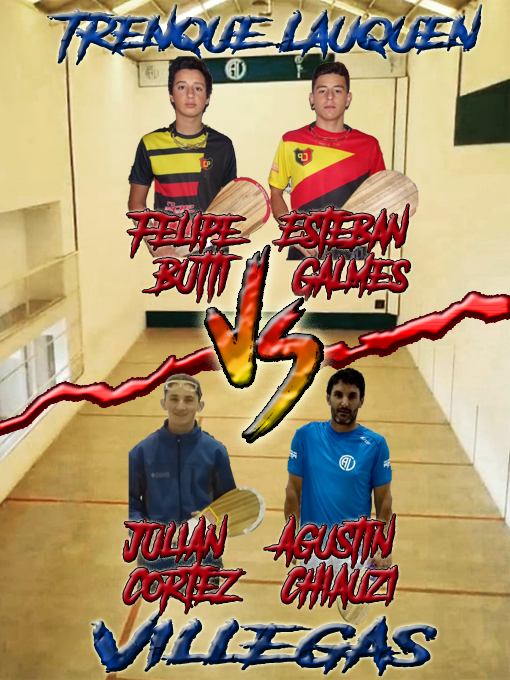
<style>
.page{position:relative;width:510px;height:680px}
.page>*{position:absolute;margin:0}
.t1{font:40.7px "AnotherDangerDemo";font-weight:bold;scale:1.36 1}
.t2{font:37.1px/44.3px "AnotherDangerDemo";font-weight:bold}
.t3{font:48.9px "AnotherDangerDemo";font-weight:bold;scale:1.94 1}
</style>
<div class="page">
<p class="t1" style="left:47px;top:4px;width:436px;height:62px">Trenque Lauquen</p>
<p class="t2" style="left:126px;top:209px;width:124px;height:94px;text-align:center">Felipe <br>Butti</p>
<p class="t2" style="left:272px;top:204px;width:139px;height:97px;text-align:center">Esteban <br>Galmes</p>
<p class="t2" style="left:123px;top:515px;width:123px;height:101px;text-align:center">JuliAn <br>Cortez</p>
<p class="t2" style="left:264px;top:514px;width:134px;height:95px;text-align:center">AgustIn <br>Chiauzi</p>
<p class="t3" style="left:91px;top:604px;width:346px;height:73px">Villegas</p>
</div>
